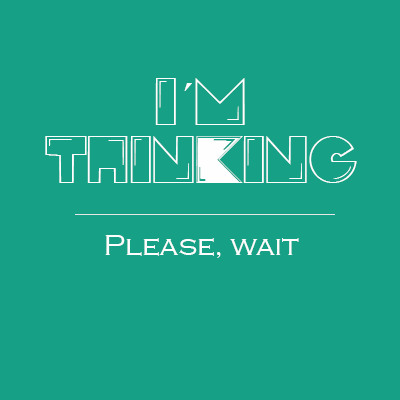
<style>
.page{position:relative;width:400px;height:400px;background:#16a085}
.page>*{position:absolute;margin:0}
.t1{font:48px "PacFont";color:#fffefe}
.t2{font:48px "TimesNewRomanPSMT";color:#fffefe}
.t3{font:30px "CopperplateGothic-Light";color:#fffefe}
</style>
<div class="page">
<p class="t1" style="left:45px;top:78px;width:312px;height:105px;text-align:center">I<span class="t2">´</span>M<br>THINkING</p>
<p class="t3" style="left:105px;top:235px;width:194px;height:23px">Please, wait</p>
</div>
